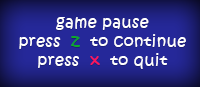
<style>
.page{position:relative;width:200px;height:87px}
.page>*{position:absolute;margin:0}
.t1{font:16px "KristenITC-Regular";letter-spacing:0.025em;color:#ffffff}
.t2{font:16px "KristenITC-Regular";letter-spacing:0.025em;color:#0ea92b}
.t3{font:16px "KristenITC-Regular";letter-spacing:0.025em;color:#fc165c}
</style>
<div class="page">
<p class="t1" style="left:19px;top:17px;width:167px;height:52px;text-align:center">game pause<br>press  <span class="t2">z</span>  to continue<br>press  <span class="t3">x</span>  to quit</p>
</div>
